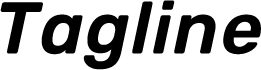
<style>
.page{position:relative;width:261px;height:70px;background:#ffffff}
.page>*{position:absolute;margin:0}
.t1{font:72px "Rubik-MediumItalic";color:#000000;font-weight:bold}
</style>
<div class="page">
<p class="t1" style="left:0px;top:0px;width:261px;height:70px">Tagline</p>
</div>
